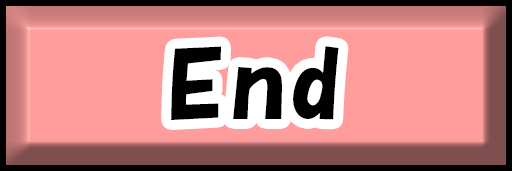
<style>
.page{position:relative;width:512px;height:171px;background:#ff9d9d}
.page>*{position:absolute;margin:0}
.t1{font:90px "HGPSoeiKakupoptai";letter-spacing:0.08em;color:#000000}
</style>
<div class="page">
<p class="t1" style="left:171px;top:46px;width:168px;height:74px">End</p>
</div>
